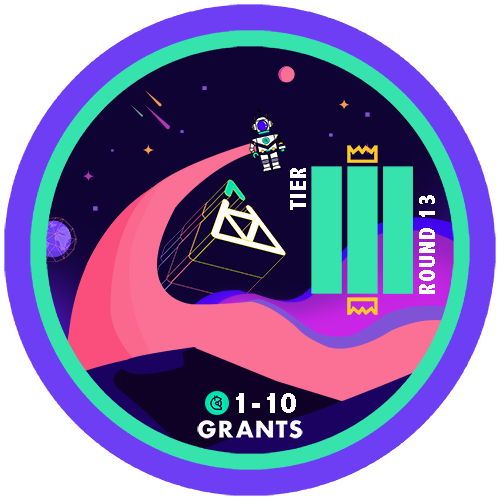
<style>
.page{position:relative;width:500px;height:500px;background:#ffffff}
.page>*{position:absolute;margin:0}
.t1{font:23.7px "AbadiMT-CondensedExtraBold";letter-spacing:0.05em;color:#ffffff}
.t2{font:30.9px "AbadiMT-CondensedExtraBold";letter-spacing:0.05em;color:#ffffff}
</style>
<div class="page">
<p class="t1" style="left:290px;top:168px;width:16px;height:42px;rotate:-90deg">TIER</p>
<p class="t1" style="left:419px;top:195px;width:16px;height:99px;rotate:-90deg">ROUND 13</p>
<p class="t2" style="left:236px;top:393px;width:60px;height:20px">1-10</p>
</div>
